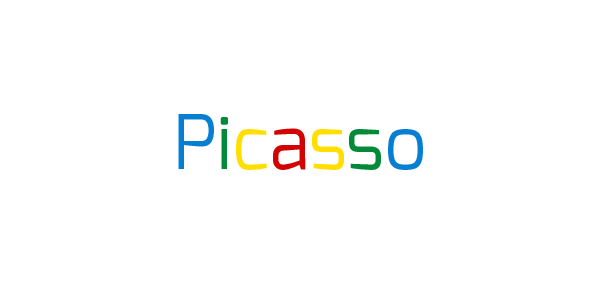
<style>
.page{position:relative;width:600px;height:300px;background:#ffffff}
.page>*{position:absolute;margin:0}
.t1{font:75px "Exo-Regular";color:#067fd3}
.t2{font:75px "Exo-Regular";color:#028a38}
.t3{font:75px "Exo-Regular";color:#ffde00}
.t4{font:75px "Exo-Regular";color:#d20303}
</style>
<div class="page">
<p class="t1" style="left:178px;top:114px;width:245px;height:56px">P<span class="t2">i</span><span class="t3">c</span><span class="t4">a</span><span class="t3">s</span><span class="t2">s</span>o</p>
</div>
